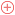
<style>
.page{position:relative;width:15px;height:15px;background:#ffffff}
.page>*{position:absolute;margin:0}
.t1{font:16px "BodoniXT";letter-spacing:-0.02em;color:#ee7777}
</style>
<div class="page">
<p class="t1" style="left:3px;top:3px;width:8px;height:8px">+</p>
</div>
